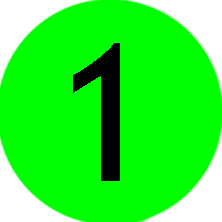
<style>
.page{position:relative;width:222px;height:222px;background:#00ff00}
.page>*{position:absolute;margin:0}
.t1{font:192px "TrebuchetMS";color:#000000}
</style>
<div class="page">
<p class="t1" style="left:73px;top:43px;width:47px;height:138px">1</p>
</div>
